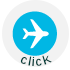
<style>
.page{position:relative;width:70px;height:70px;background:#f2f2f2}
.page>*{position:absolute;margin:0}
.t1{font:12px "ArialMT";color:#003c38}
</style>
<div class="page">
<p class="t1" style="left:20px;top:55px;width:32px;height:11px">click</p>
</div>
